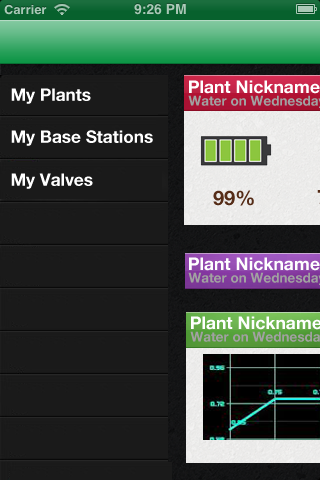
<style>
.page{position:relative;width:320px;height:480px;background:#1a1a1a}
.page>*{position:absolute;margin:0}
.t1{font:17.2px "HelveticaNeue-Bold";color:#ffffff}
.t2{font:17.6px "HelveticaNeue-Bold";color:#ffffff}
.t3{font:20px "HelveticaNeue-Bold";color:#552c17}
</style>
<div class="page">
<p class="t1" style="left:11px;top:88px;width:80px;height:16px">My Plants</p>
<p class="t2" style="left:189px;top:80px;width:131px;height:14px">Plant Nickname</p>
<p class="t1" style="left:11px;top:130px;width:142px;height:16px">My Base Stations</p>
<p class="t1" style="left:11px;top:173px;width:82px;height:16px">My Valves</p>
<p class="t3" style="left:213px;top:190px;width:41px;height:16px">99%</p>
<p class="t2" style="left:189px;top:257px;width:131px;height:14px">Plant Nickname</p>
<p class="t2" style="left:191px;top:316px;width:131px;height:14px">Plant Nickname</p>
</div>
